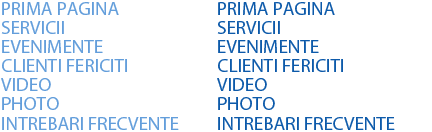
<style>
.page{position:relative;width:432px;height:132px;background:#ffffff}
.page>*{position:absolute;margin:0}
.t1{font:19px "MyriadPro-Regular";color:#639edb}
.t2{font:19px "MyriadPro-Regular";color:#0d5aaa}
</style>
<div class="page">
<p class="t1" style="left:2px;top:2px;width:117px;height:13px">PRIMA PAGINA</p>
<p class="t2" style="left:218px;top:2px;width:117px;height:13px">PRIMA PAGINA</p>
<p class="t1" style="left:1px;top:21px;width:63px;height:13px">SERVICII</p>
<p class="t2" style="left:217px;top:21px;width:63px;height:13px">SERVICII</p>
<p class="t1" style="left:2px;top:40px;width:101px;height:13px">EVENIMENTE</p>
<p class="t2" style="left:218px;top:40px;width:101px;height:13px">EVENIMENTE</p>
<p class="t1" style="left:2px;top:59px;width:125px;height:13px">CLIENTI FERICITI</p>
<p class="t2" style="left:218px;top:59px;width:125px;height:13px">CLIENTI FERICITI</p>
<p class="t1" style="left:1px;top:78px;width:50px;height:13px">VIDEO</p>
<p class="t2" style="left:217px;top:78px;width:50px;height:13px">VIDEO</p>
<p class="t1" style="left:2px;top:97px;width:57px;height:13px">PHOTO</p>
<p class="t2" style="left:218px;top:97px;width:57px;height:13px">PHOTO</p>
<p class="t1" style="left:2px;top:117px;width:177px;height:13px">INTREBARI FRECVENTE</p>
<p class="t2" style="left:218px;top:117px;width:177px;height:13px">INTREBARI FRECVENTE</p>
</div>
